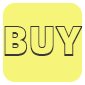
<style>
.page{position:relative;width:85px;height:85px;background:#f6f57a}
.page>*{position:absolute;margin:0}
.t1{font:40.4px "a_PlakatTitul3D-ExtraBold";color:#383838}
</style>
<div class="page">
<p class="t1" style="left:4px;top:26px;width:79px;height:30px">BUY</p>
</div>
